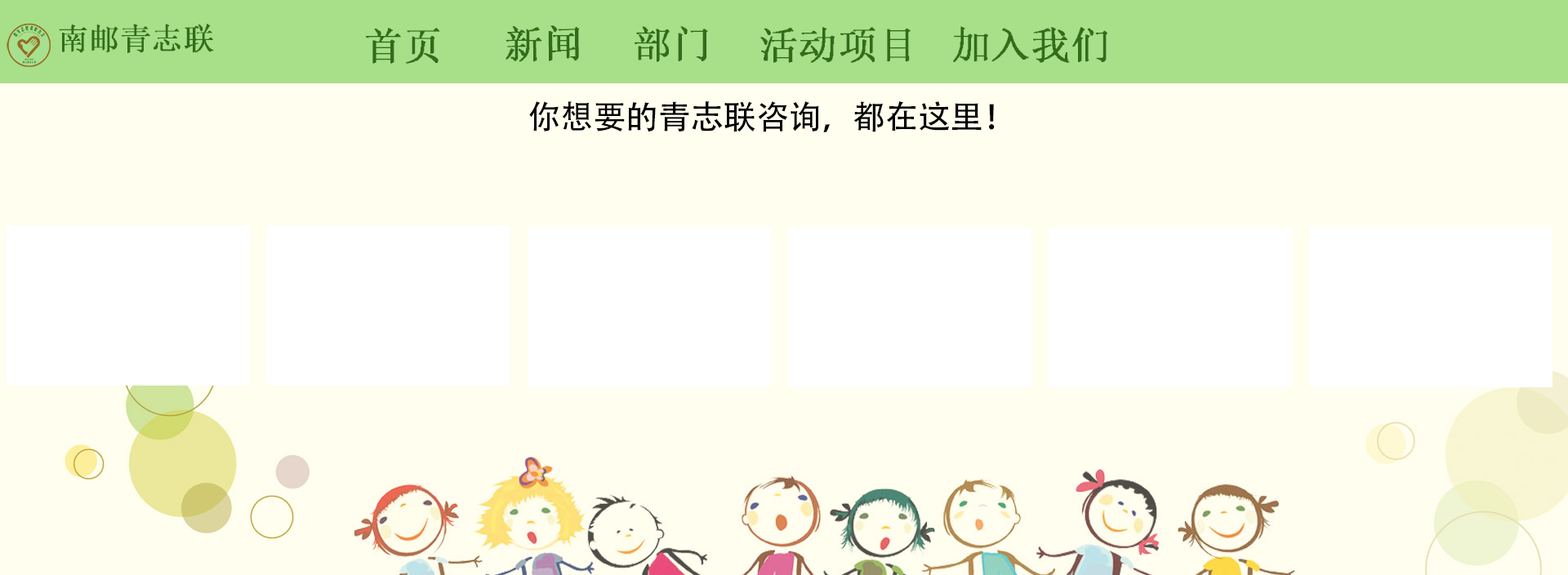
<style>
.page{position:relative;width:1568px;height:575px;background:#fffeef}
.page>*{position:absolute;margin:0}
.t1{font:31px "System";color:#326c1b}
.t2{font:39.2px "System";color:#326c1b}
.t3{font:32.7px "AdobeHeitiStd-Regular";color:#000000}
</style>
<div class="page">
<p class="t1" style="left:59px;top:24px;width:155px;height:29px">南邮青志联</p>
<p class="t2" style="left:366px;top:28px;width:74px;height:36px">首页</p>
<p class="t2" style="left:506px;top:25px;width:73px;height:37px;rotate:-1deg">新闻</p>
<p class="t2" style="left:635px;top:26px;width:73px;height:36px">部门</p>
<p class="t2" style="left:760px;top:27px;width:151px;height:36px">活动项目</p>
<p class="t2" style="left:953px;top:26px;width:154px;height:37px">加入我们</p>
<p class="t3" style="left:529px;top:101px;width:466px;height:31px">你想要的青志联咨询，都在这里！</p>
</div>
